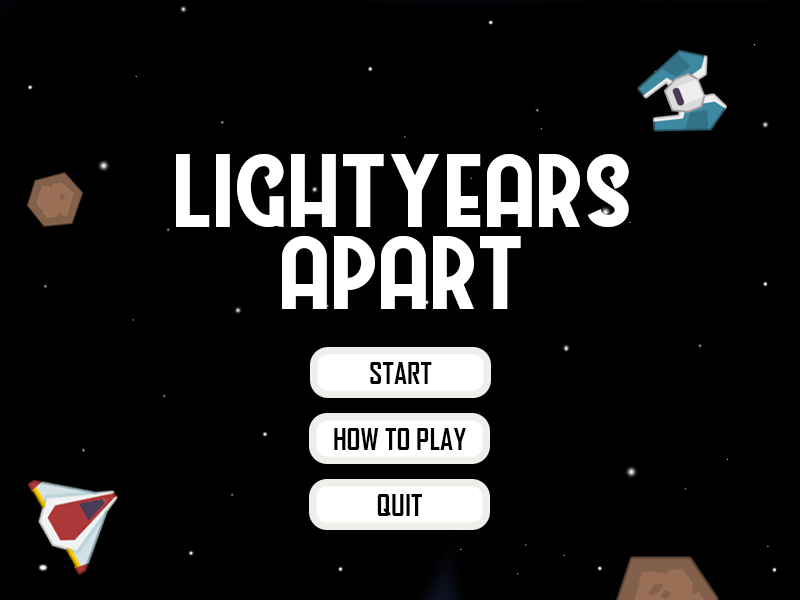
<style>
.page{position:relative;width:800px;height:600px;background:#000000}
.page>*{position:absolute;margin:0}
.t1{font:104.4px/82.2px "Westmeath";color:#ffffff}
.t2{font:29.2px "AgencyFB-Bold";color:#000000}
</style>
<div class="page">
<p class="t1" style="left:176px;top:154px;width:453px;height:155px;text-align:center">lightyears<br>apart</p>
<p class="t2" style="left:370px;top:362px;width:62px;height:22px">START</p>
<p class="t2" style="left:334px;top:428px;width:132px;height:22px">HOW TO PLAY</p>
<p class="t2" style="left:377px;top:494px;width:45px;height:22px">QUIT</p>
</div>
